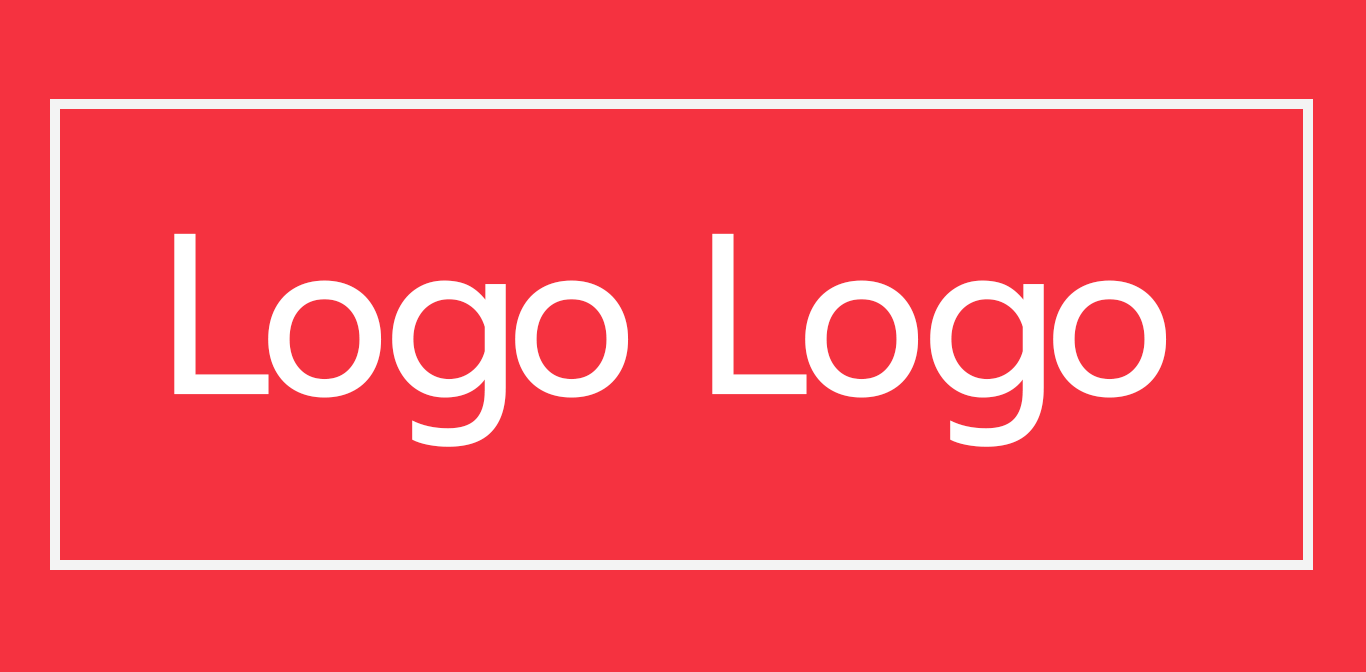
<style>
.page{position:relative;width:1366px;height:672px;background:#f53240}
.page>*{position:absolute;margin:0}
.t1{font:229px "Prompt-Regular";letter-spacing:-0.035em;color:#ffffff;scale:0.9 1}
</style>
<div class="page">
<p class="t1" style="left:174px;top:233px;width:993px;height:214px">Logo Logo</p>
</div>
